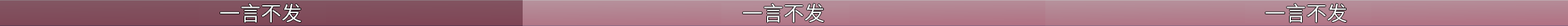
<style>
.page{position:relative;width:1568px;height:26px}
.page>*{position:absolute;margin:0}
.t1{font:20.6px "SourceHanSansSC-Normal";color:#ffffff}
</style>
<div class="page">
<p class="t1" style="left:220px;top:3px;width:81px;height:20px">一言不发</p>
<p class="t1" style="left:743px;top:3px;width:81px;height:20px">一言不发</p>
<p class="t1" style="left:1266px;top:3px;width:81px;height:20px">一言不发</p>
</div>
